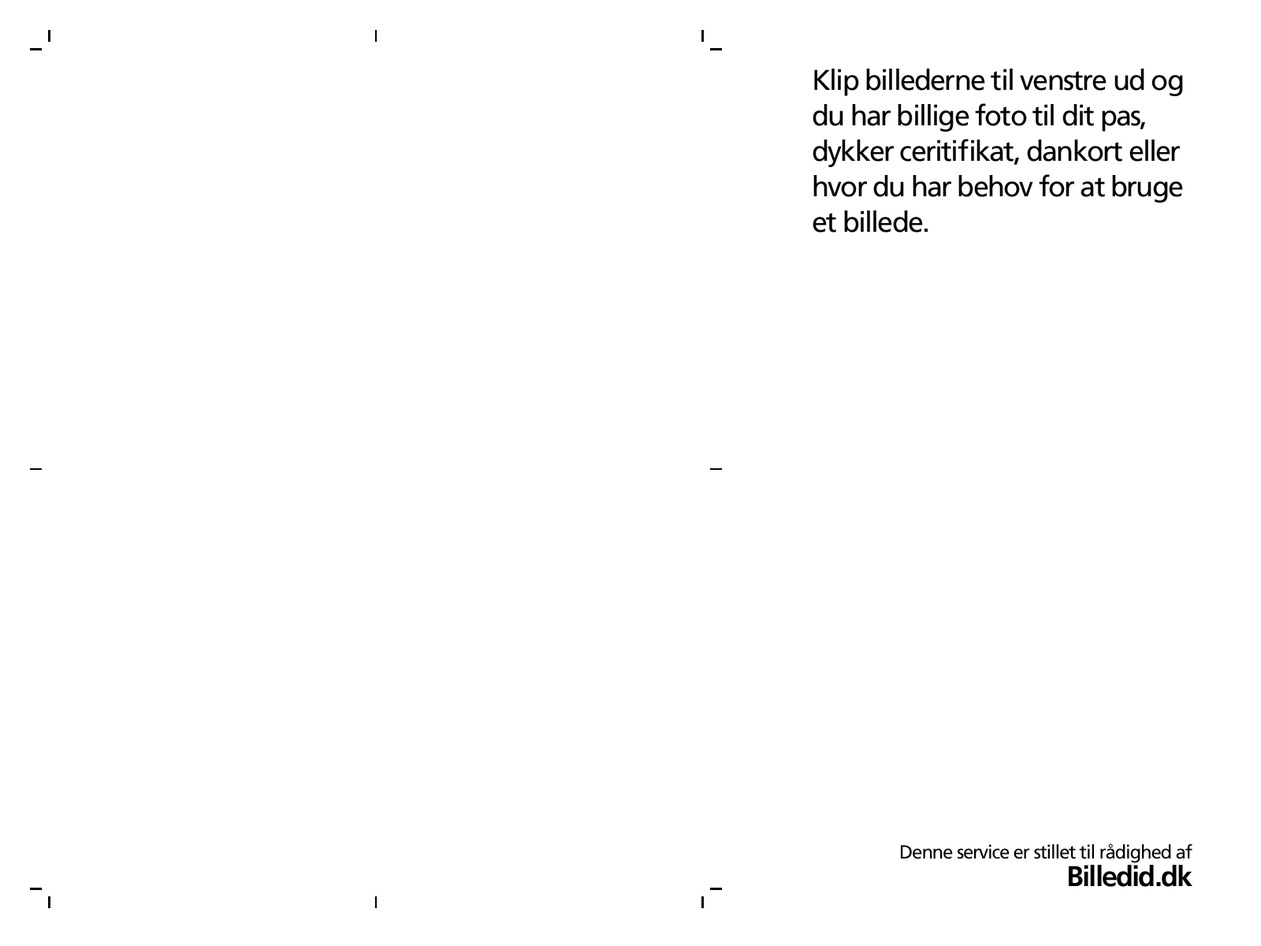
<style>
.page{position:relative;width:1261px;height:946px;background:#ffffff}
.page>*{position:absolute;margin:0}
.t1{font:28.4px/35.5px "FrutigerLTStd-Roman";letter-spacing:-0.05em;color:#000000}
.t2{font:18.9px "FrutigerLTStd-Roman";letter-spacing:-0.05em;color:#000000}
.t3{font:28.4px/27.6px "FrutigerLTStd-Bold";letter-spacing:-0.05em;color:#000000}
</style>
<div class="page">
<p class="t1" style="left:813px;top:69px;width:370px;height:163px">Klip billederne til venstre ud og du har billige foto til dit pas, dykker ceritifikat, dankort eller hvor du har behov for at bruge et billede.</p>
<p class="t2" style="left:901px;top:843px;width:291px;height:44px;text-align:right">Denne service er stillet til rådighed af<br><span class="t3">Billedid.dk</span></p>
</div>
